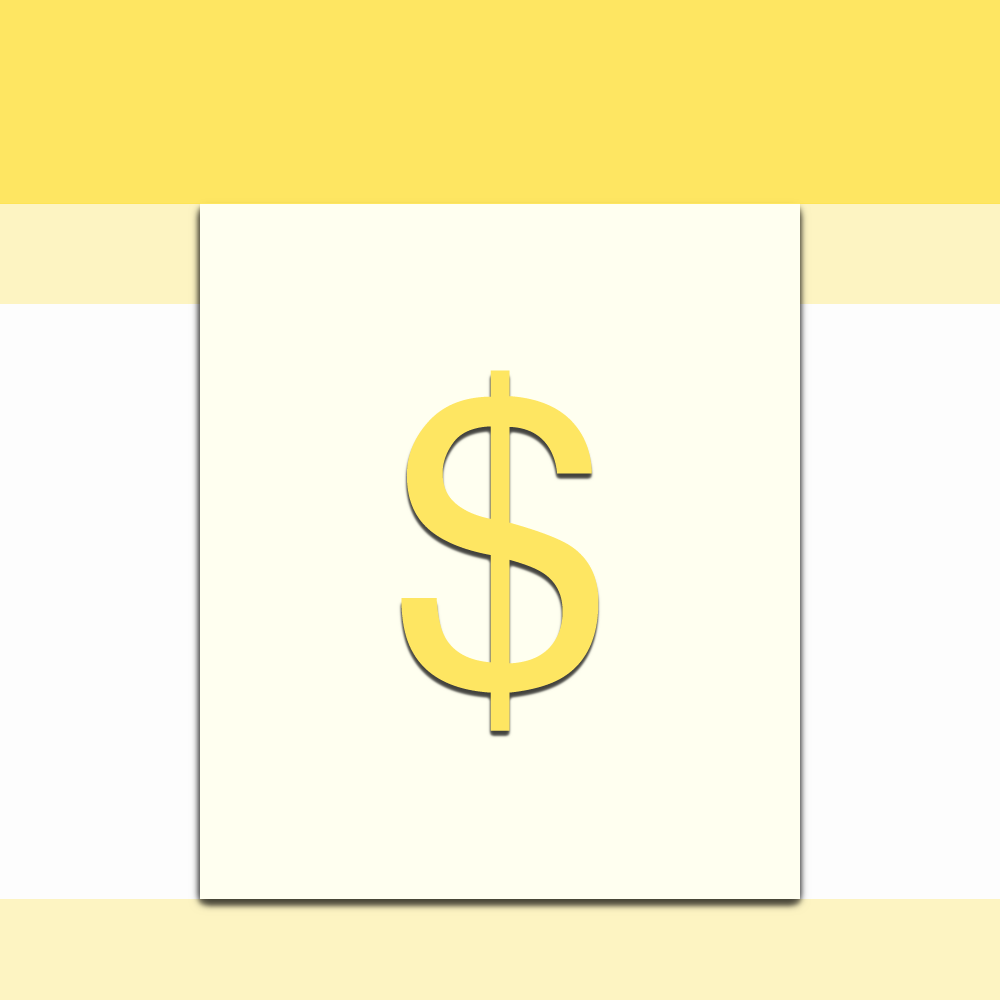
<style>
.page{position:relative;width:1000px;height:1000px;background:#fffff0}
.page>*{position:absolute;margin:0}
.t1{font:404.2px "Helvetica";color:#fee662}
</style>
<div class="page">
<p class="t1" style="left:401px;top:370px;width:198px;height:361px">$</p>
</div>
